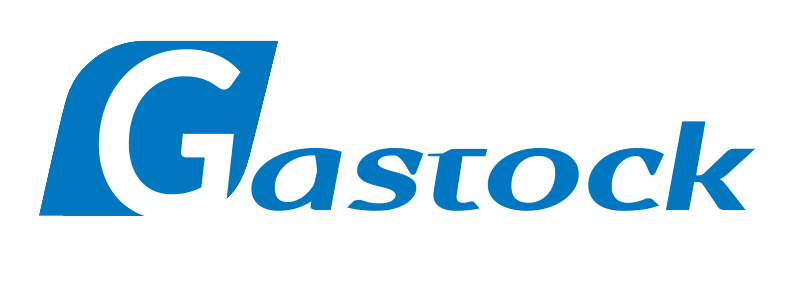
<style>
.page{position:relative;width:791px;height:282px;background:#ffffff}
.page>*{position:absolute;margin:0}
.t1{font:126.1px "Carlito-BoldItalic";color:#0077c0;scale:1.5 1}
</style>
<div class="page">
<p class="t1" style="left:251px;top:121px;width:505px;height:90px">astock</p>
</div>
